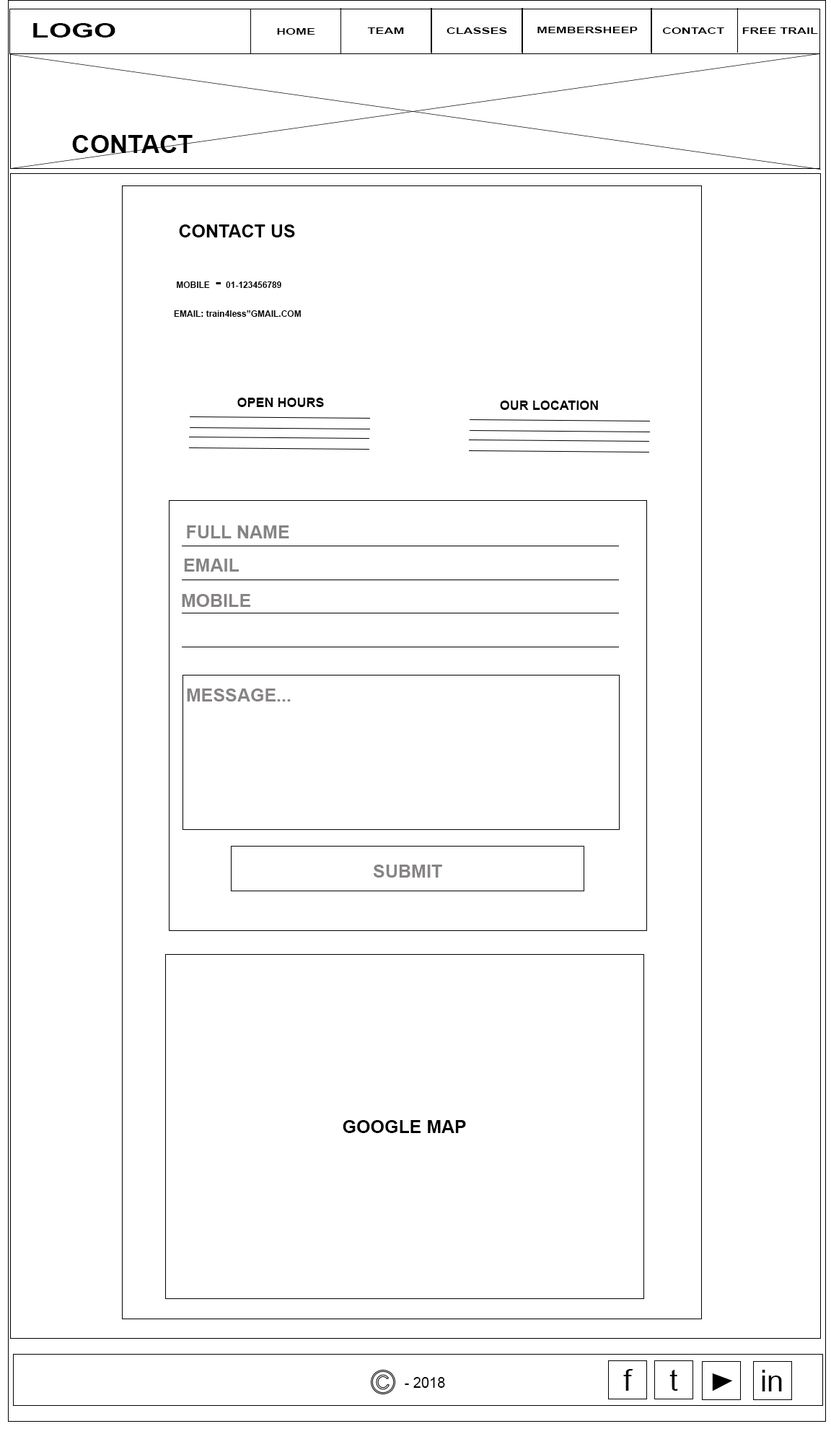
<style>
.page{position:relative;width:831px;height:1434px;background:#ffffff}
.page>*{position:absolute;margin:0}
.t1{font:19.3px "Arial-BoldMT";color:#000000;scale:1.49 1}
.t2{font:8.7px "Arial-BoldMT";color:#000000;scale:1.49 1}
.t3{font:25.1px "Arial-BoldMT";color:#000000}
.t4{font:18px "Arial-BoldMT";color:#000000}
.t5{font:8.7px "Arial-BoldMT";color:#000000}
.t6{font:13px "Arial-BoldMT";color:#000000}
.t7{font:18px "Arial-BoldMT";color:#868383}
.t8{font:29.9px "ArialMT";color:#000000}
.t9{font:14.4px "ArialMT";color:#000000}
</style>
<div class="page">
<p class="t1" style="left:33px;top:23px;width:82px;height:15px">LOGO</p>
<p class="t2" style="left:277px;top:28px;width:38px;height:7px">HOME</p>
<p class="t2" style="left:367px;top:27px;width:37px;height:7px">TEAM</p>
<p class="t2" style="left:447px;top:27px;width:60px;height:7px">CLASSES</p>
<p class="t2" style="left:538px;top:27px;width:100px;height:6px">MEMBERSHEEP</p>
<p class="t2" style="left:663px;top:27px;width:62px;height:7px">CONTACT</p>
<p class="t2" style="left:743px;top:27px;width:75px;height:7px">FREE TRAIL</p>
<p class="t3" style="left:72px;top:135px;width:121px;height:18px">CONTACT</p>
<p class="t4" style="left:179px;top:224px;width:116px;height:13px">CONTACT US</p>
<p class="t5" style="left:177px;top:281px;width:104px;height:7px">MOBILE<span class="t4"> - </span>01-123456789</p>
<p class="t5" style="left:174px;top:310px;width:127px;height:7px">EMAIL: train4less”GMAIL.COM</p>
<p class="t6" style="left:237px;top:398px;width:87px;height:9px">OPEN HOURS</p>
<p class="t6" style="left:500px;top:401px;width:98px;height:9px">OUR LOCATION</p>
<p class="t7" style="left:187px;top:525px;width:102px;height:13px">FULL NAME</p>
<p class="t7" style="left:184px;top:559px;width:55px;height:13px">EMAIL</p>
<p class="t7" style="left:182px;top:594px;width:68px;height:13px">MOBILE</p>
<p class="t7" style="left:187px;top:689px;width:104px;height:13px">MESSAGE...</p>
<p class="t7" style="left:373px;top:865px;width:69px;height:13px">SUBMIT</p>
<p class="t4" style="left:343px;top:1120px;width:123px;height:13px">GOOGLE MAP</p>
<p class="t8" style="left:624px;top:1369px;width:10px;height:22px">f</p>
<p class="t8" style="left:670px;top:1369px;width:8px;height:22px">t</p>
<p class="t8" style="left:762px;top:1370px;width:20px;height:22px">in</p>
<p class="t9" style="left:405px;top:1377px;width:40px;height:11px">- 2018</p>
</div>
